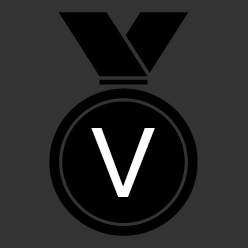
<style>
.page{position:relative;width:248px;height:248px;background:#333333}
.page>*{position:absolute;margin:0}
.t1{font:107px "Raavi";letter-spacing:-0.14em;color:#ffffff}
</style>
<div class="page">
<p class="t1" style="left:91px;top:128px;width:64px;height:69px">V</p>
</div>
